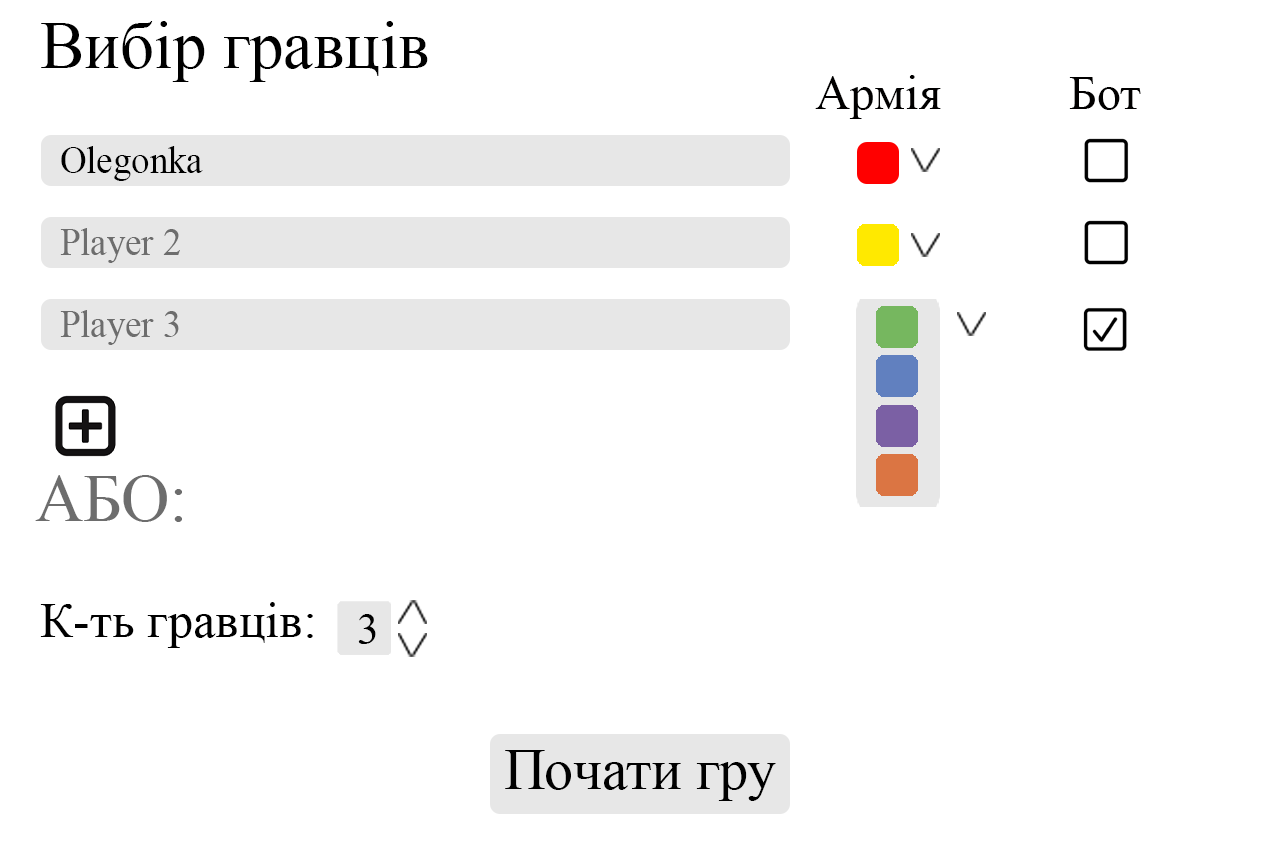
<style>
.page{position:relative;width:1280px;height:853px;background:#ffffff}
.page>*{position:absolute;margin:0}
.t1{font:66.7px "TimesNewRomanPSMT";color:#000000}
.t2{font:49px "TimesNewRomanPSMT";color:#010000}
.t3{font:48px "TimesNewRomanPSMT";color:#010000}
.t4{font:39.4px "TimesNewRomanPSMT";color:#000000;scale:0.94 1}
.t5{font:39.4px "TimesNewRomanPSMT";color:#6d6d6d;scale:0.94 1}
.t6{font:66.7px "TimesNewRomanPSMT";color:#6d6d6d}
.t7{font:50.1px "TimesNewRomanPSMT";color:#000000}
.t8{font:44.1px "TimesNewRomanPSMT";color:#000000}
</style>
<div class="page">
<p class="t1" style="left:41px;top:21px;width:387px;height:61px">Вибір гравців</p>
<p class="t2" style="left:815px;top:75px;width:126px;height:44px">Армія</p>
<p class="t3" style="left:1069px;top:77px;width:72px;height:33px">Бот</p>
<p class="t4" style="left:61px;top:146px;width:142px;height:35px">Olegonka</p>
<p class="t5" style="left:60px;top:228px;width:120px;height:35px">Player 2</p>
<p class="t5" style="left:60px;top:310px;width:119px;height:35px">Player 3</p>
<p class="t6" style="left:35px;top:475px;width:147px;height:47px">АБО:</p>
<p class="t7" style="left:40px;top:602px;width:273px;height:46px">К-ть гравців:</p>
<p class="t8" style="left:358px;top:614px;width:18px;height:30px">3</p>
</div>
